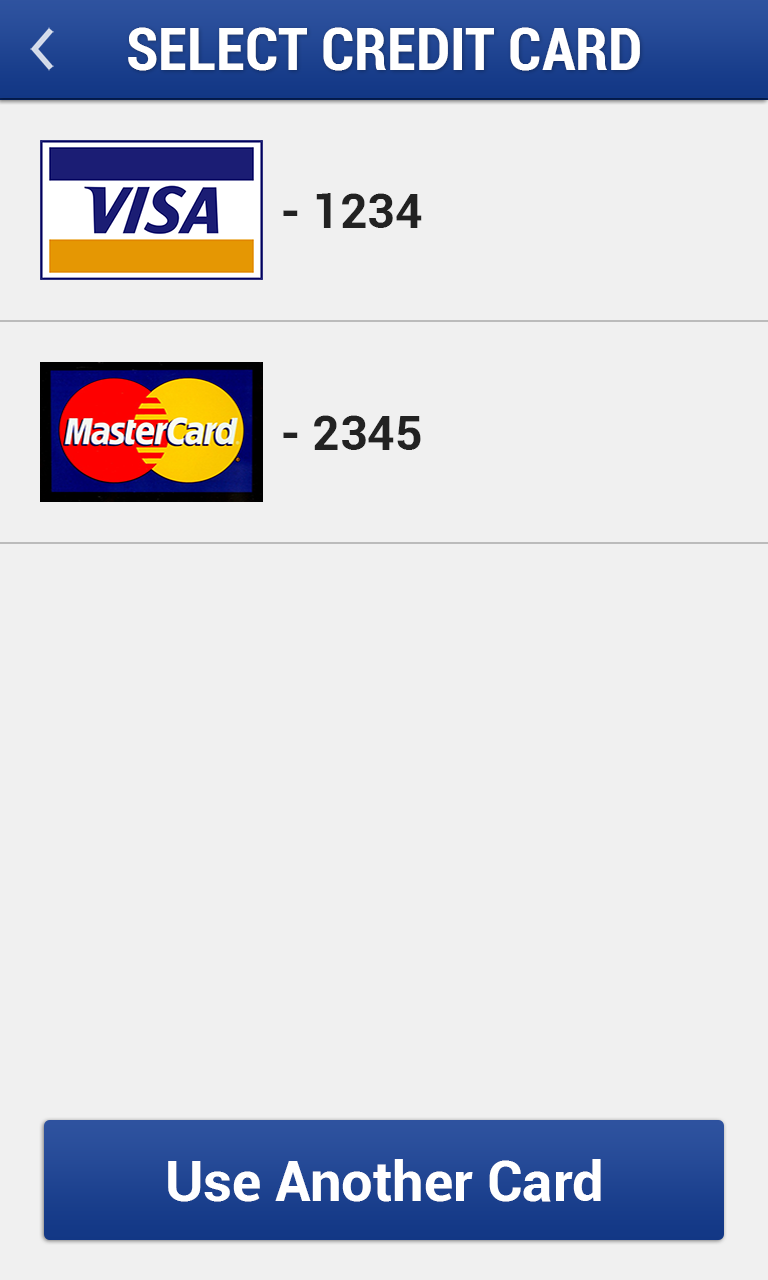
<style>
.page{position:relative;width:768px;height:1280px;background:#f0f0f0}
.page>*{position:absolute;margin:0}
.t1{font:60px "Roboto-BoldCondensed";color:#ffffff}
.t2{font:48px "Roboto-Bold";color:#222222}
.t3{font:56px "Roboto-Bold";color:#ffffff}
</style>
<div class="page">
<p class="t1" style="left:128px;top:27px;width:512px;height:44px">SELECT CREDIT CARD</p>
<p class="t2" style="left:283px;top:193px;width:139px;height:35px">- 1234</p>
<p class="t2" style="left:283px;top:415px;width:138px;height:35px">- 2345</p>
<p class="t3" style="left:168px;top:1159px;width:433px;height:43px">Use Another Card</p>
</div>
